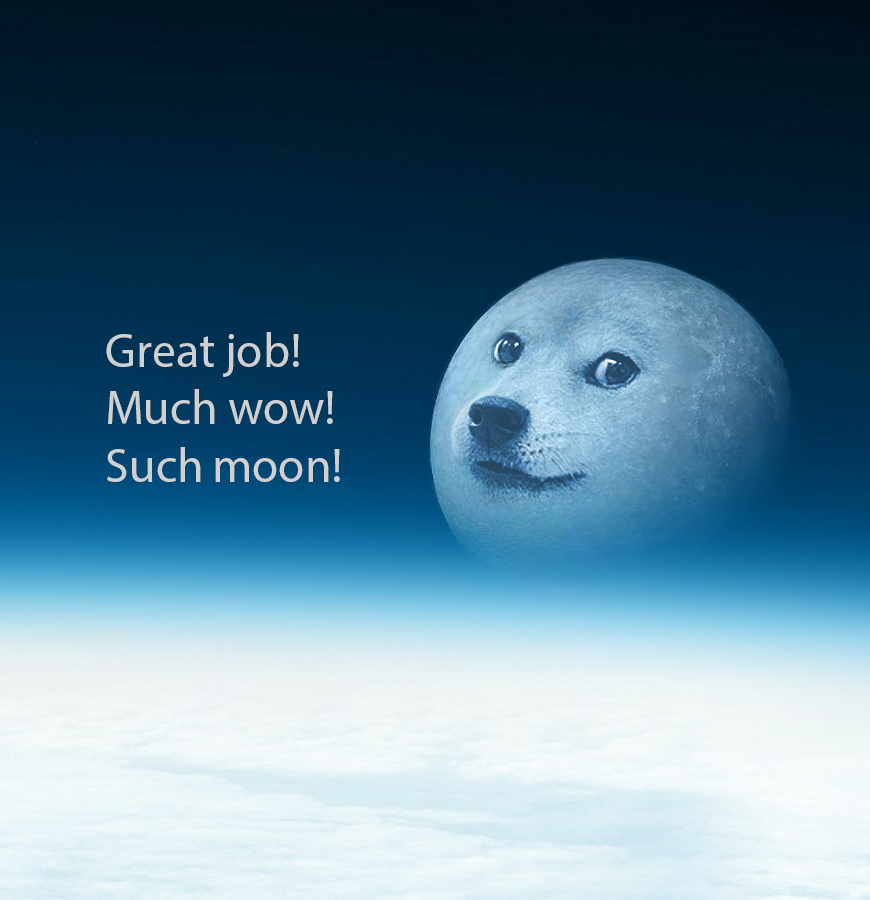
<style>
.page{position:relative;width:870px;height:900px}
.page>*{position:absolute;margin:0}
.t1{font:48px "MyriadPro-Regular";color:#d0d0d0}
</style>
<div class="page">
<p class="t1" style="left:106px;top:332px;width:234px;height:150px">Great job!<br>Much wow!<br>Such moon!</p>
</div>
